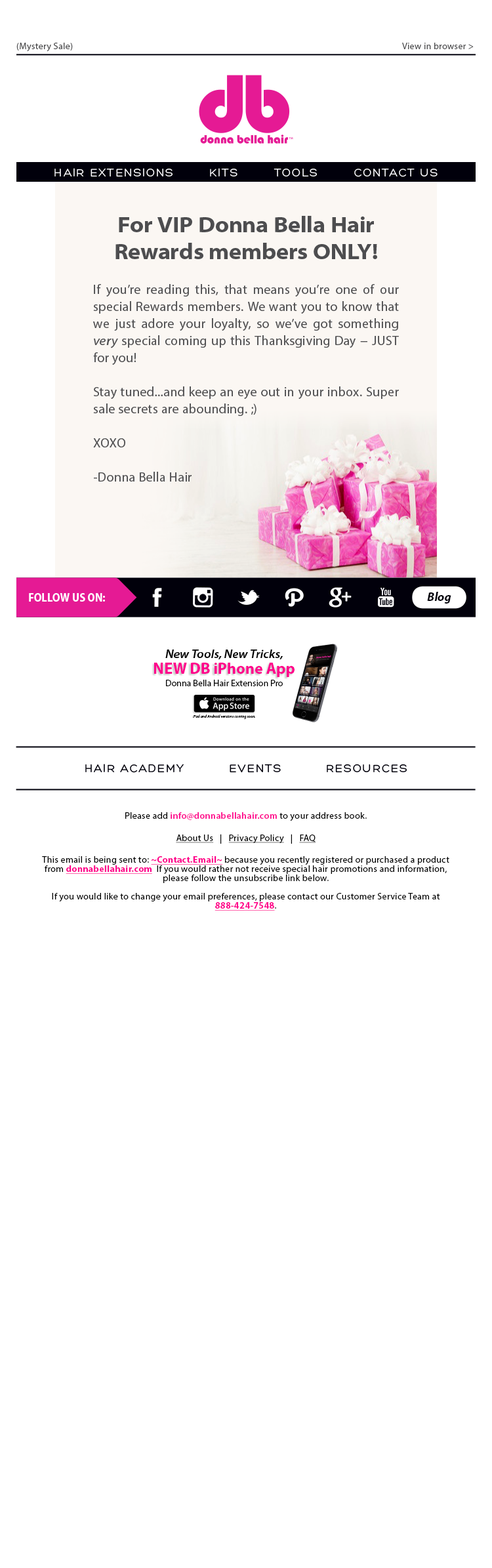
<style>
.page{position:relative;width:492px;height:1568px;background:#ffffff}
.page>*{position:absolute;margin:0}
.t1{font:9.2px "MyriadPro-Regular";letter-spacing:0.025em;color:#4d4d4f}
.t2{font:11.8px "Hero";letter-spacing:0.1em;color:#ffffff}
.t3{font:22.3px "MyriadPro-BoldSemiExt";color:#4d4d4f}
.t4{font:13.1px/17.1px "MyriadPro-Regular";letter-spacing:0.025em;color:#4d4d4f}
.t5{font:13.1px/17.1px "MyriadPro-SemiExtIt";letter-spacing:0.025em;color:#4d4d4f}
.t6{font:11.8px "MyriadPro-BoldSemiCn";color:#ffffff}
.t7{font:12.2px "MyriadPro-BoldIt";color:#01000b}
.t8{font:11.8px "MyriadPro-SemiboldSemiExtIt";color:#000000}
.t9{font:15.7px "MyriadPro-Bold";color:#ff008c}
.t10{font:9.2px "MyriadPro-Regular";color:#000000}
.t11{font:3.9px "MyriadPro-It";color:#000000}
.t12{font:11.8px "Hero";letter-spacing:0.1em;color:#01000b}
.t13{font:9.2px/9.2px "MyriadPro-Regular";letter-spacing:0.025em;color:#000000}
.t14{font:9.2px "MyriadPro-Regular";letter-spacing:0.025em;color:#000000}
.t15{font:9.2px "MyriadPro-Semibold";letter-spacing:0.025em;color:#ff008c}
.t16{font:9.2px "MyriadPro-Regular";letter-spacing:0.025em;color:#000000;text-decoration:underline}
.t17{font:9.2px "MyriadPro-Bold";letter-spacing:0.025em;color:#ff008c;text-decoration:underline}
.t18{font:9.2px/9.2px "MyriadPro-Bold";letter-spacing:0.025em;color:#ff008c;text-decoration:underline}
</style>
<div class="page">
<p class="t1" style="left:16px;top:43px;width:458px;height:9px">(Mystery Sale)                           View in browser &gt;</p>
<p class="t2" style="left:54px;top:168px;width:384px;height:9px">HAIR EXTENSIONS        KITS        TOOLS        CONTACT US</p>
<p class="t3" style="left:115px;top:216px;width:262px;height:43px;text-align:center">For VIP Donna Bella Hair Rewards members ONLY!</p>
<p class="t4" style="left:93px;top:284px;width:306px;height:198px;text-align:justify">If you’re reading this, that means you’re one of our special Rewards members. We want you to know that we just adore your loyalty, so we’ve got something <span class="t5">very</span> special coming up this Thanksgiving Day­­ − JUST for you! <br><br>Stay tuned...and keep an eye out in your inbox. Super sale secrets are abounding. ;)<br><br>XOXO<br><br>­-Donna Bella Hair</p>
<p class="t6" style="left:29px;top:593px;width:76px;height:9px">FOLLOW US ON:</p>
<p class="t7" style="left:427px;top:592px;width:24px;height:12px">Blog</p>
<p class="t8" style="left:165px;top:650px;width:118px;height:9px">New Tools, New Tricks,</p>
<p class="t9" style="left:154px;top:663px;width:141px;height:14px">NEW DB iPhone App</p>
<p class="t10" style="left:166px;top:680px;width:117px;height:6px">Donna Bella Hair Extension Pro</p>
<p class="t11" style="left:193px;top:714px;width:62px;height:5px">iPad and Android versions coming soon.</p>
<p class="t12" style="left:85px;top:764px;width:322px;height:9px">HAIR ACADEMY          EVENTS          RESOURCES</p>
<p class="t13" style="left:42px;top:812px;width:407px;height:99px;text-align:center"><span class="t14">Please add </span><span class="t15">info@donnabellahair.com</span><span class="t14"> to your address book.<br><br></span><span class="t16">About Us</span><span class="t14">   |   </span><span class="t16">Privacy Policy</span><span class="t14">   |   </span><span class="t16">FAQ<br></span><span class="t14"><br>This email is being sent to: </span><span class="t17">~Contact.Email~</span><span class="t14"> because you recently registered </span>or purchased a product from <span class="t18">donnabellahair.com</span>  If you would rather not receive special hair promotions and information, please follow the unsubscribe link below.<br><br>If you would like to change your email preferences, please contact our Customer Service Team at <span class="t18">888-424-7548</span>.</p>
</div>
